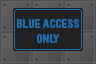
<style>
.page{position:relative;width:96px;height:64px;background:#212121}
.page>*{position:absolute;margin:0}
.t1{font:12px "HelveticaRoundedLTStd-BdCn";color:#1772b8}
</style>
<div class="page">
<p class="t1" style="left:17px;top:19px;width:62px;height:24px;text-align:center">BLUE ACCESS<br>ONLY</p>
</div>
